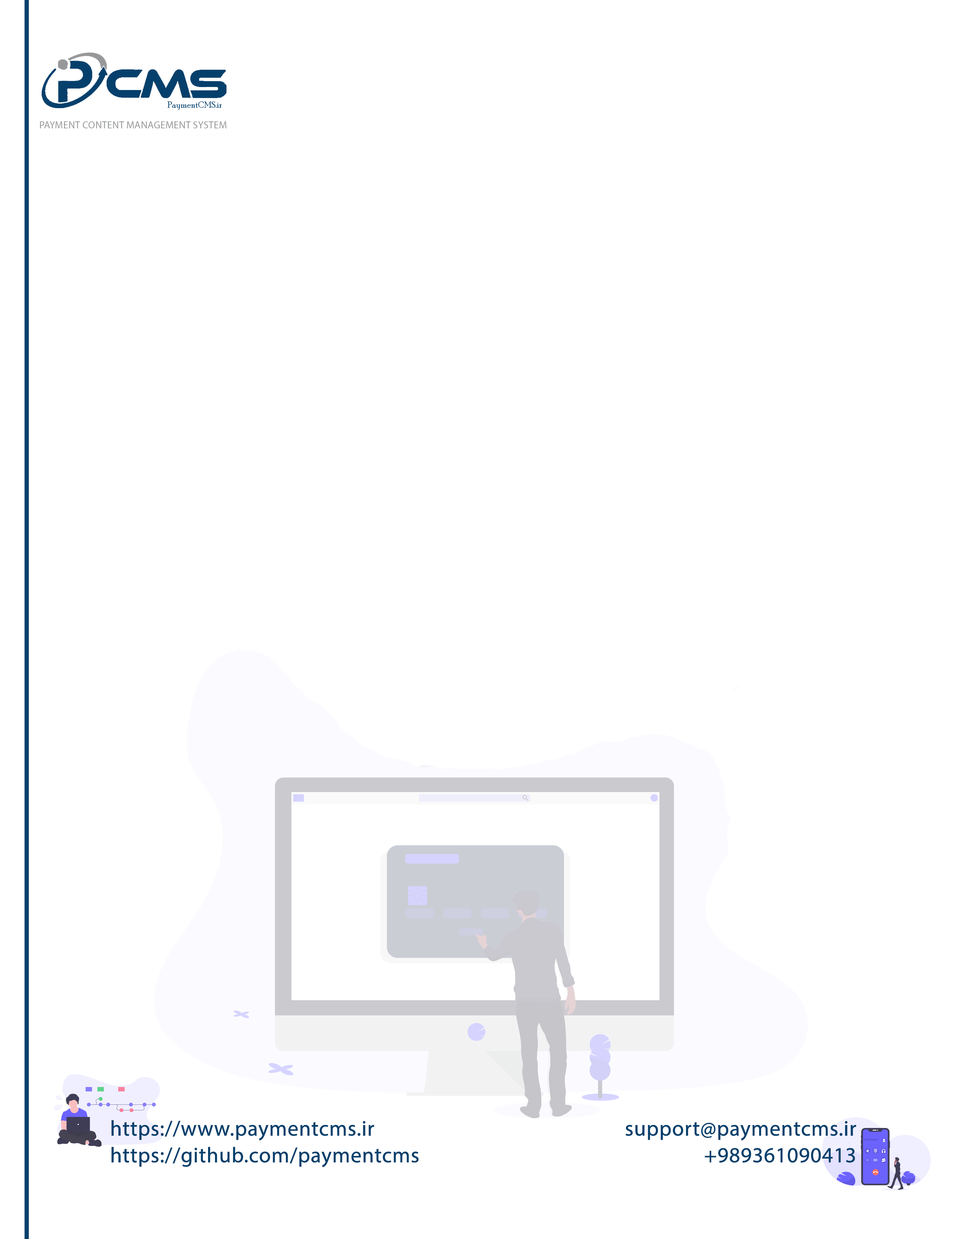
<style>
.page{position:relative;width:962px;height:1239px;background:#ffffff}
.page>*{position:absolute;margin:0}
.t1{font:10px "MyriadPro-Regular";color:#97989a;text-transform:uppercase}
.t2{font:21.5px/26.7px "MyriadPro-Regular";color:#05406c;font-weight:bold}
</style>
<div class="page">
<p class="t1" style="left:40px;top:121px;width:187px;height:7px">pAYMENT Content management system</p>
<p class="t2" style="left:111px;top:1120px;width:308px;height:48px">https://www.paymentcms.ir<br>https://github.com/paymentcms</p>
<p class="t2" style="left:626px;top:1121px;width:230px;height:42px;text-align:right">support@paymentcms.ir<br>+989361090413</p>
</div>
